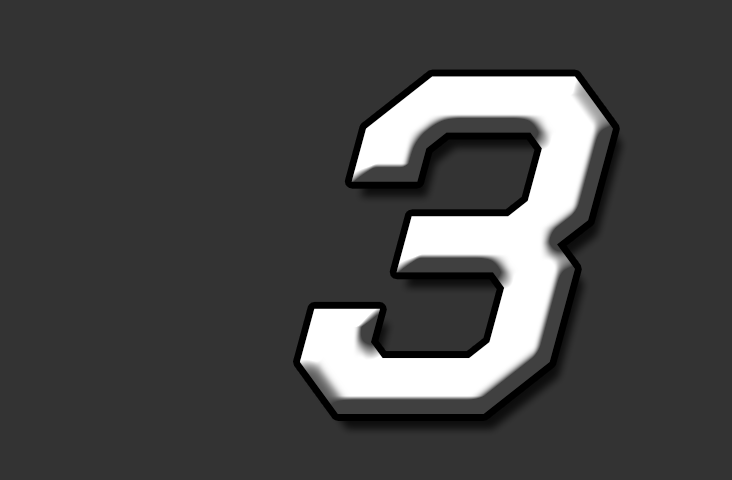
<style>
.page{position:relative;width:732px;height:480px;background:#333333}
.page>*{position:absolute;margin:0}
.t1{font:499.4px "ChakraPetch-Bold";color:#ffffff;scale:0.97 1}
</style>
<div class="page">
<p class="t1" style="left:299px;top:76px;width:314px;height:338px">3</p>
</div>
